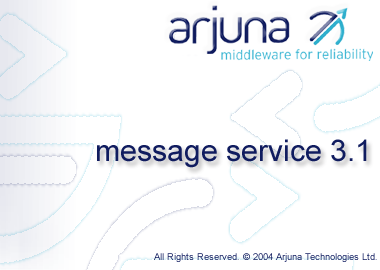
<style>
.page{position:relative;width:380px;height:270px;background:#ffffff}
.page>*{position:absolute;margin:0}
.t1{font:30px "ArialMT";color:#101c5f}
.t2{font:9.5px "ArialMT";color:#142062}
</style>
<div class="page">
<p class="t1" style="left:97px;top:139px;width:270px;height:29px">message service 3.1</p>
<p class="t2" style="left:154px;top:253px;width:223px;height:9px">All Rights Reserved. © 2004 Arjuna Technologies Ltd.</p>
</div>
